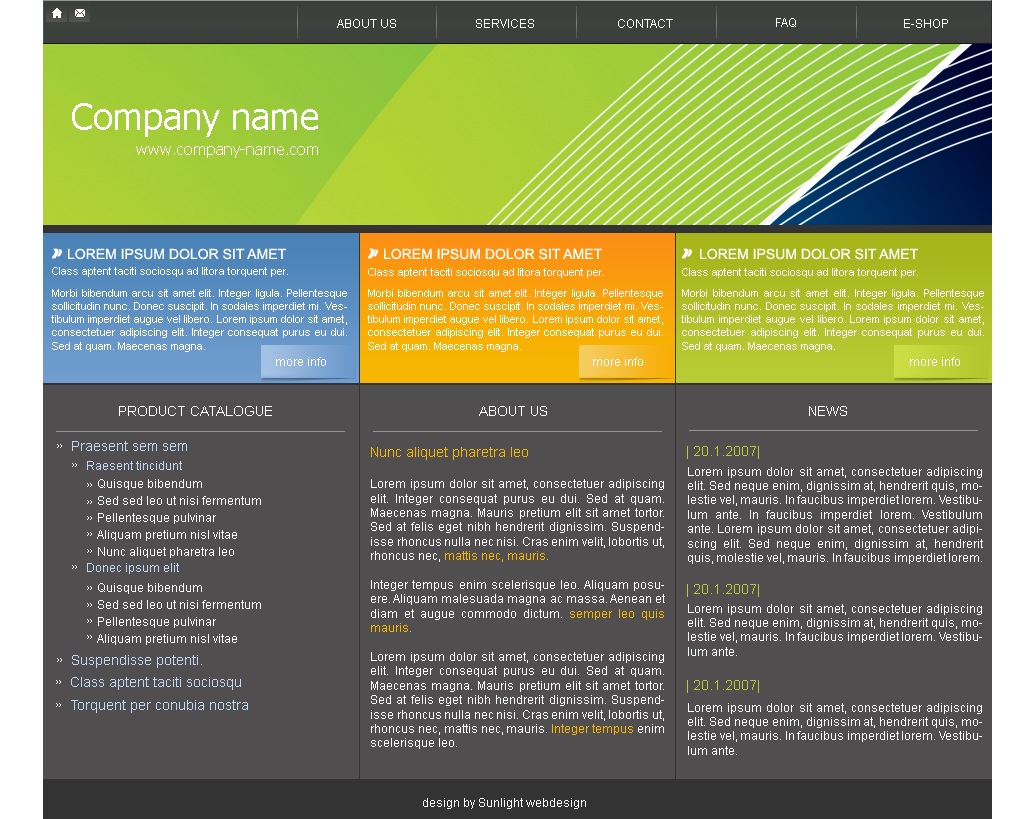
<style>
.page{position:relative;width:1036px;height:819px;background:#504e4e}
.page>*{position:absolute;margin:0}
.t1{font:12px "ArialMT";color:#ffffff;text-transform:uppercase}
.t2{font:36px "Tahoma";color:#ffffff}
.t3{font:16px "Tahoma";color:#ffffff}
.t4{font:14px "ArialMT";color:#ffffff;text-transform:uppercase}
.t5{font:11px "ArialMT";color:#ffffff}
.t6{font:12px "ArialMT";color:#ffffff}
.t7{font:14px "ArialMT";color:#bed8f6}
.t8{font:14px "ArialMT";color:#f6b601}
.t9{font:12px "ArialMT";color:#f6b601}
.t10{font:14px "ArialMT";color:#b8cb34;text-transform:uppercase}
.t11{font:12px "ArialMT";color:#bed8f6}
.t12{font:12px/17px "ArialMT";color:#fefefe}
</style>
<div class="page">
<p class="t1" style="left:337px;top:19px;width:59px;height:9px">About us</p>
<p class="t1" style="left:476px;top:19px;width:58px;height:9px">services</p>
<p class="t1" style="left:618px;top:19px;width:55px;height:9px">contact</p>
<p class="t1" style="left:776px;top:18px;width:20px;height:9px">FAQ</p>
<p class="t1" style="left:904px;top:19px;width:44px;height:9px">E-shop</p>
<p class="t2" style="left:72px;top:103px;width:246px;height:34px">Company name</p>
<p class="t3" style="left:136px;top:146px;width:182px;height:12px">www.company-name.com</p>
<p class="t4" style="left:68px;top:248px;width:218px;height:12px">Lorem ipsum dolor sit amet</p>
<p class="t4" style="left:384px;top:248px;width:218px;height:12px">Lorem ipsum dolor sit amet</p>
<p class="t4" style="left:700px;top:248px;width:218px;height:12px">Lorem ipsum dolor sit amet</p>
<p class="t5" style="left:52px;top:267px;width:236px;height:10px">Class aptent taciti sociosqu ad litora torquent per.</p>
<p class="t5" style="left:368px;top:268px;width:236px;height:10px">Class aptent taciti sociosqu ad litora torquent per.</p>
<p class="t5" style="left:682px;top:268px;width:236px;height:10px">Class aptent taciti sociosqu ad litora torquent per.</p>
<p class="t5" style="left:51px;top:289px;width:296px;height:63px;text-align:justify">Morbi bibendum arcu sit amet elit. Integer ligula. Pellentesque sollicitudin nunc. Donec suscipit. In sodales imperdiet mi. Vestibulum imperdiet augue vel libero. Lorem ipsum dolor sit amet, consectetuer adipiscing elit. Integer consequat purus eu dui. Sed at quam. Maecenas magna.</p>
<p class="t5" style="left:367px;top:289px;width:296px;height:63px;text-align:justify">Morbi bibendum arcu sit amet elit. Integer ligula. Pellentesque sollicitudin nunc. Donec suscipit. In sodales imperdiet mi. Vestibulum imperdiet augue vel libero. Lorem ipsum dolor sit amet, consectetuer adipiscing elit. Integer consequat purus eu dui. Sed at quam. Maecenas magna.</p>
<p class="t5" style="left:681px;top:289px;width:303px;height:63px;text-align:justify">Morbi bibendum arcu sit amet elit. Integer ligula. Pellentesque sollicitudin nunc. Donec suscipit. In sodales imperdiet mi. Vestibulum imperdiet augue vel libero. Lorem ipsum dolor sit amet, consectetuer adipiscing elit. Integer consequat purus eu dui. Sed at quam. Maecenas magna.</p>
<p class="t6" style="left:276px;top:357px;width:50px;height:9px">more info</p>
<p class="t6" style="left:593px;top:357px;width:50px;height:9px">more info</p>
<p class="t6" style="left:910px;top:357px;width:50px;height:9px">more info</p>
<p class="t4" style="left:119px;top:406px;width:153px;height:10px">Product catalogue</p>
<p class="t4" style="left:479px;top:406px;width:68px;height:10px">About us</p>
<p class="t4" style="left:809px;top:406px;width:38px;height:10px">News</p>
<p class="t7" style="left:72px;top:441px;width:115px;height:10px">Praesent sem sem</p>
<p class="t6" style="left:371px;top:447px;width:294px;height:302px;text-align:justify"><span class="t8">Nunc aliquet pharetra leo<br><br></span>Lorem ipsum dolor sit amet, consectetuer adipiscing elit. Integer consequat purus eu dui. Sed at quam. Maecenas magna. Mauris pretium elit sit amet tortor. Sed at felis eget nibh hendrerit dignissim. Suspendisse rhoncus nulla nec nisi. Cras enim velit, lobortis ut, rhoncus nec, <span class="t9">mattis nec, mauris.<br></span><br>Integer tempus enim scelerisque leo. Aliquam posuere. Aliquam malesuada magna ac massa. Aenean et diam et augue commodo dictum. <span class="t9">semper leo quis mauris.<br></span><br>Lorem ipsum dolor sit amet, consectetuer adipiscing elit. Integer consequat purus eu dui. Sed at quam. Maecenas magna. Mauris pretium elit sit amet tortor. Sed at felis eget nibh hendrerit dignissim. Suspendisse rhoncus nulla nec nisi. Cras enim velit, lobortis ut, rhoncus nec, mattis nec, mauris. <span class="t9">Integer tempus</span> enim scelerisque leo.</p>
<p class="t10" style="left:687px;top:446px;width:72px;height:13px">| 20.1.2007|</p>
<p class="t11" style="left:87px;top:461px;width:95px;height:9px">Raesent tincidunt</p>
<p class="t6" style="left:688px;top:467px;width:295px;height:97px;text-align:justify">Lorem ipsum dolor sit amet, consectetuer adipiscing elit. Sed neque enim, dignissim at, hendrerit quis, molestie vel, mauris. In faucibus imperdiet lorem. Vestibulum ante. In faucibus imperdiet lorem. Vestibulum ante. Lorem ipsum dolor sit amet, consectetuer adipiscing elit. Sed neque enim, dignissim at, hendrerit quis, molestie vel, mauris. In faucibus imperdiet lorem. Vestibulum ante. In faucibus imperdiet lorem. Vestibulum ante.</p>
<p class="t12" style="left:97px;top:479px;width:164px;height:79px;text-align:justify">Quisque bibendum<br>Sed sed leo ut nisi fermentum<br>Pellentesque pulvinar<br>Aliquam pretium nisl vitae<br>Nunc aliquet pharetra leo</p>
<p class="t11" style="left:87px;top:563px;width:92px;height:11px">Donec ipsum elit</p>
<p class="t12" style="left:97px;top:583px;width:164px;height:62px;text-align:justify">Quisque bibendum<br>Sed sed leo ut nisi fermentum<br>Pellentesque pulvinar<br>Aliquam pretium nisl vitae</p>
<p class="t10" style="left:687px;top:584px;width:72px;height:13px">| 20.1.2007|</p>
<p class="t6" style="left:688px;top:604px;width:294px;height:52px;text-align:justify">Lorem ipsum dolor sit amet, consectetuer adipiscing elit. Sed neque enim, dignissim at, hendrerit quis, molestie vel, mauris. In faucibus imperdiet lorem. Vestibulum ante.</p>
<p class="t7" style="left:72px;top:655px;width:130px;height:13px">Suspendisse potenti.</p>
<p class="t7" style="left:71px;top:677px;width:170px;height:13px">Class aptent taciti sociosqu</p>
<p class="t10" style="left:687px;top:680px;width:72px;height:13px">| 20.1.2007|</p>
<p class="t7" style="left:71px;top:700px;width:177px;height:13px">Torquent per conubia nostra</p>
<p class="t6" style="left:688px;top:703px;width:294px;height:52px;text-align:justify">Lorem ipsum dolor sit amet, consectetuer adipiscing elit. Sed neque enim, dignissim at, hendrerit quis, molestie vel, mauris. In faucibus imperdiet lorem. Vestibulum ante.</p>
<p class="t6" style="left:423px;top:798px;width:163px;height:11px">design by Sunlight webdesign</p>
</div>
